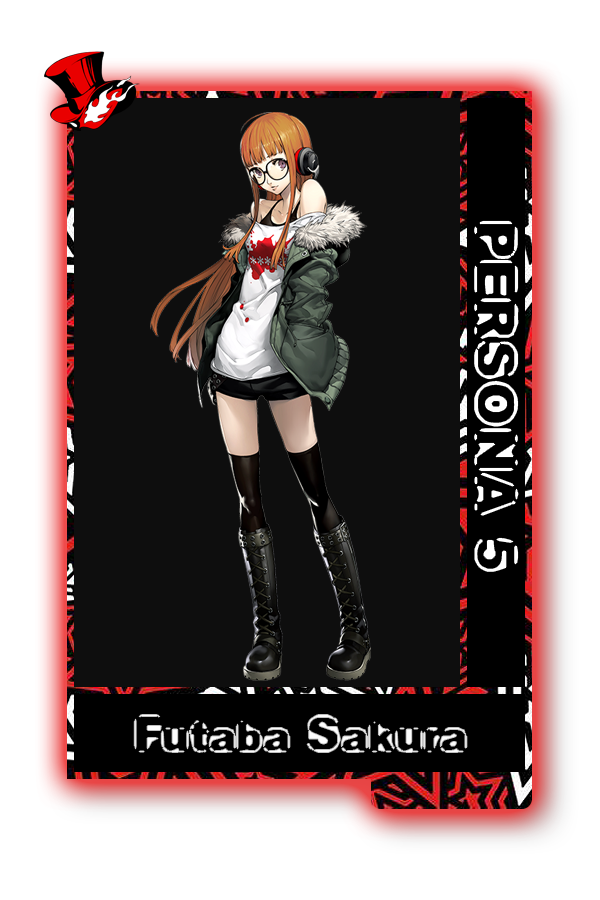
<style>
.page{position:relative;width:600px;height:900px;background:#0e0e0e}
.page>*{position:absolute;margin:0}
.t1{font:41.7px "Untitled";color:#ffffff}
.t2{font:37.5px "Untitled";letter-spacing:-0.06em;color:#fdfdfd}
</style>
<div class="page">
<p class="t1" style="left:475px;top:221px;width:43px;height:350px;rotate:90deg">PERSONA 5</p>
<p class="t2" style="left:134px;top:715px;width:333px;height:37px">Futaba Sakura</p>
</div>
